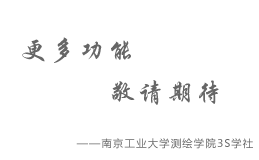
<style>
.page{position:relative;width:259px;height:160px;background:#ffffff}
.page>*{position:absolute;margin:0}
.t1{font:45.1px "STXingkai";letter-spacing:0.1em;color:#666666;font-variant:small-caps}
.t2{font:18px "MicrosoftYaHei";letter-spacing:0.1em;color:#666666;font-variant:small-caps}
</style>
<div class="page">
<p class="t1" style="left:22px;top:37px;width:109px;height:26px">更多功能</p>
<p class="t1" style="left:111px;top:80px;width:108px;height:25px">敬请期待</p>
<p class="t2" style="left:76px;top:138px;width:177px;height:11px">——南京工业大学测绘学院3S学社</p>
</div>
